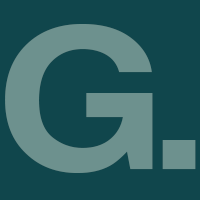
<style>
.page{position:relative;width:200px;height:200px;background:#10464c}
.page>*{position:absolute;margin:0}
.t1{font:196px "Helvetica-Bold";letter-spacing:-0.08em;color:#6d918e;scale:1.12 1}
</style>
<div class="page">
<p class="t1" style="left:5px;top:24px;width:191px;height:149px">G.</p>
</div>
